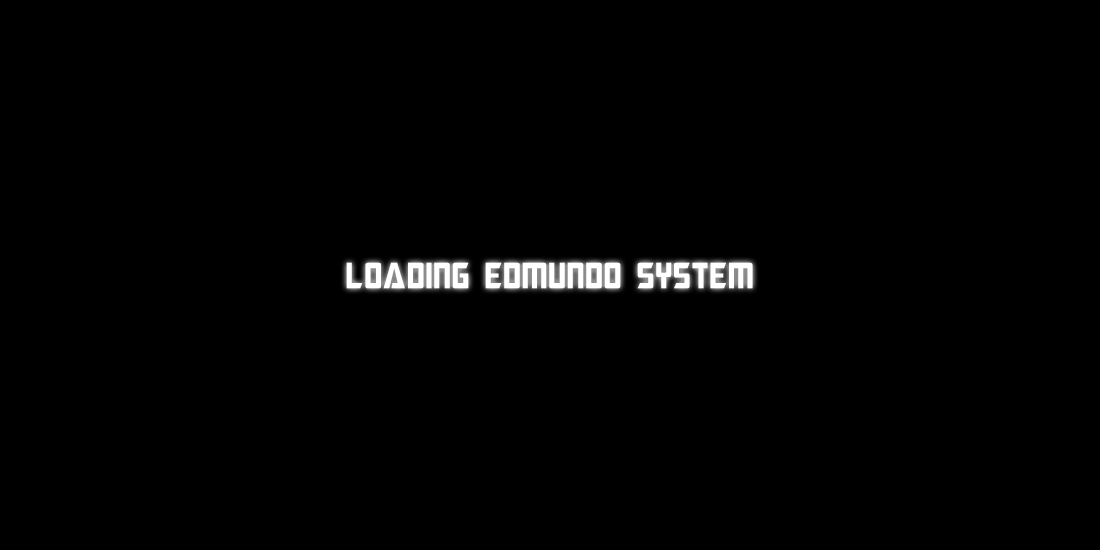
<style>
.page{position:relative;width:1100px;height:550px;background:#000000}
.page>*{position:absolute;margin:0}
.t1{font:36.5px "MegatronCondensed";color:#ffffff}
</style>
<div class="page">
<p class="t1" style="left:346px;top:262px;width:407px;height:27px">loading edmundo system</p>
</div>
